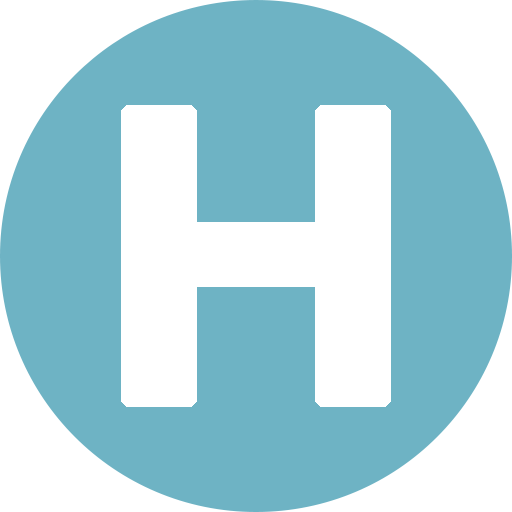
<style>
.page{position:relative;width:512px;height:512px;background:#6eb3c4}
.page>*{position:absolute;margin:0}
.t1{font:384px "MicrosoftYaHei-Bold";color:#ffffff;font-weight:bold;scale:1.04 1}
</style>
<div class="page">
<p class="t1" style="left:121px;top:105px;width:270px;height:302px">H</p>
</div>
